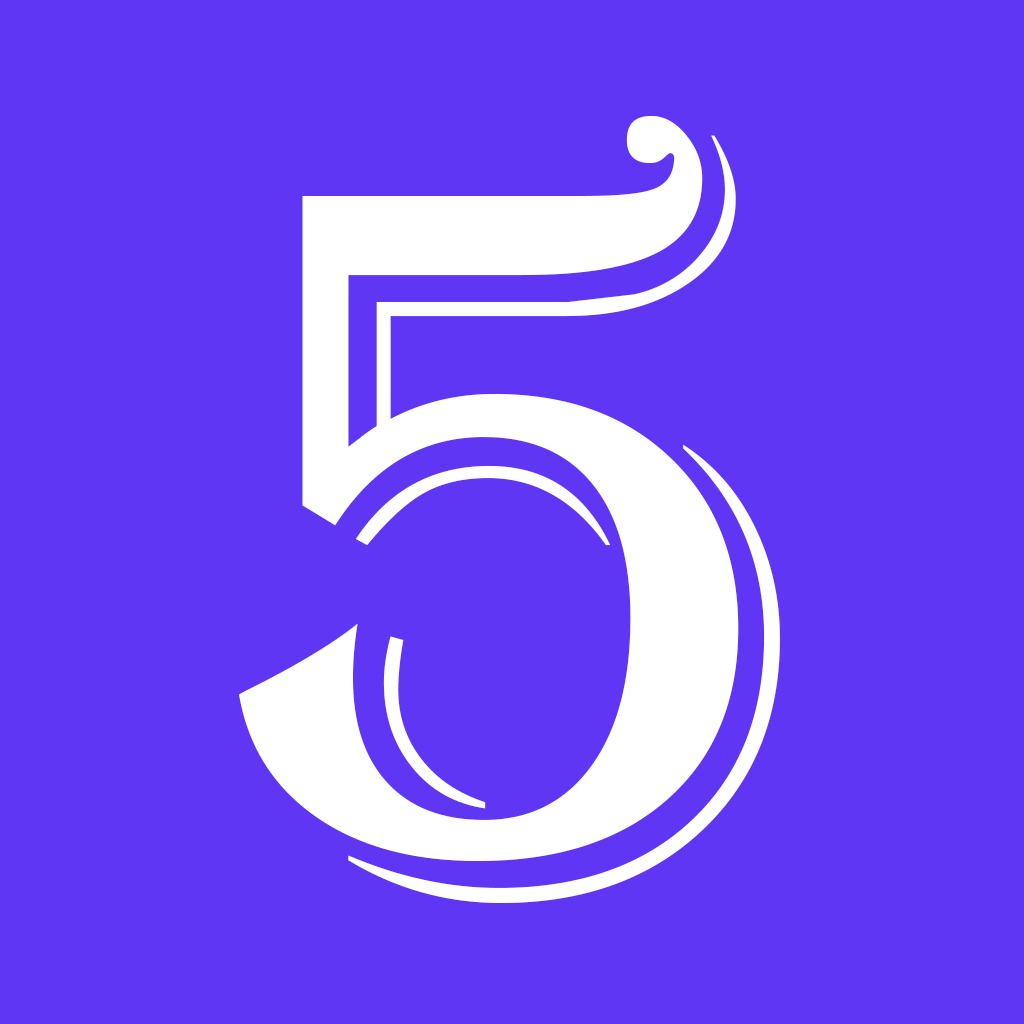
<style>
.page{position:relative;width:1024px;height:1024px;background:#5e36f3}
.page>*{position:absolute;margin:0}
.t1{font:1041px "Algerian";color:#ffffff}
</style>
<div class="page">
<p class="t1" style="left:239px;top:116px;width:541px;height:787px">5</p>
</div>
